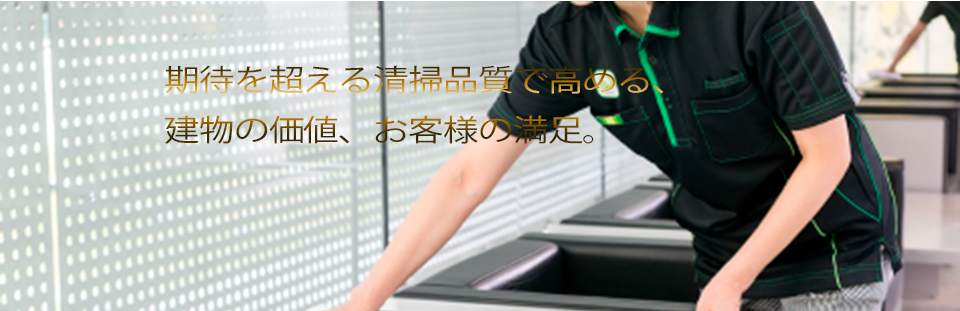
<style>
.page{position:relative;width:960px;height:311px}
.page>*{position:absolute;margin:0}
.t1{font:30px/25px "KozGoPr6N-Regular";letter-spacing:-0.02em;scale:1.19 1}
</style>
<div class="page">
<p class="t1" style="left:165px;top:65px;width:499px;height:79px">期待を超える清掃品質で高める、<br><br>建物の価値、お客様の満足。</p>
</div>
